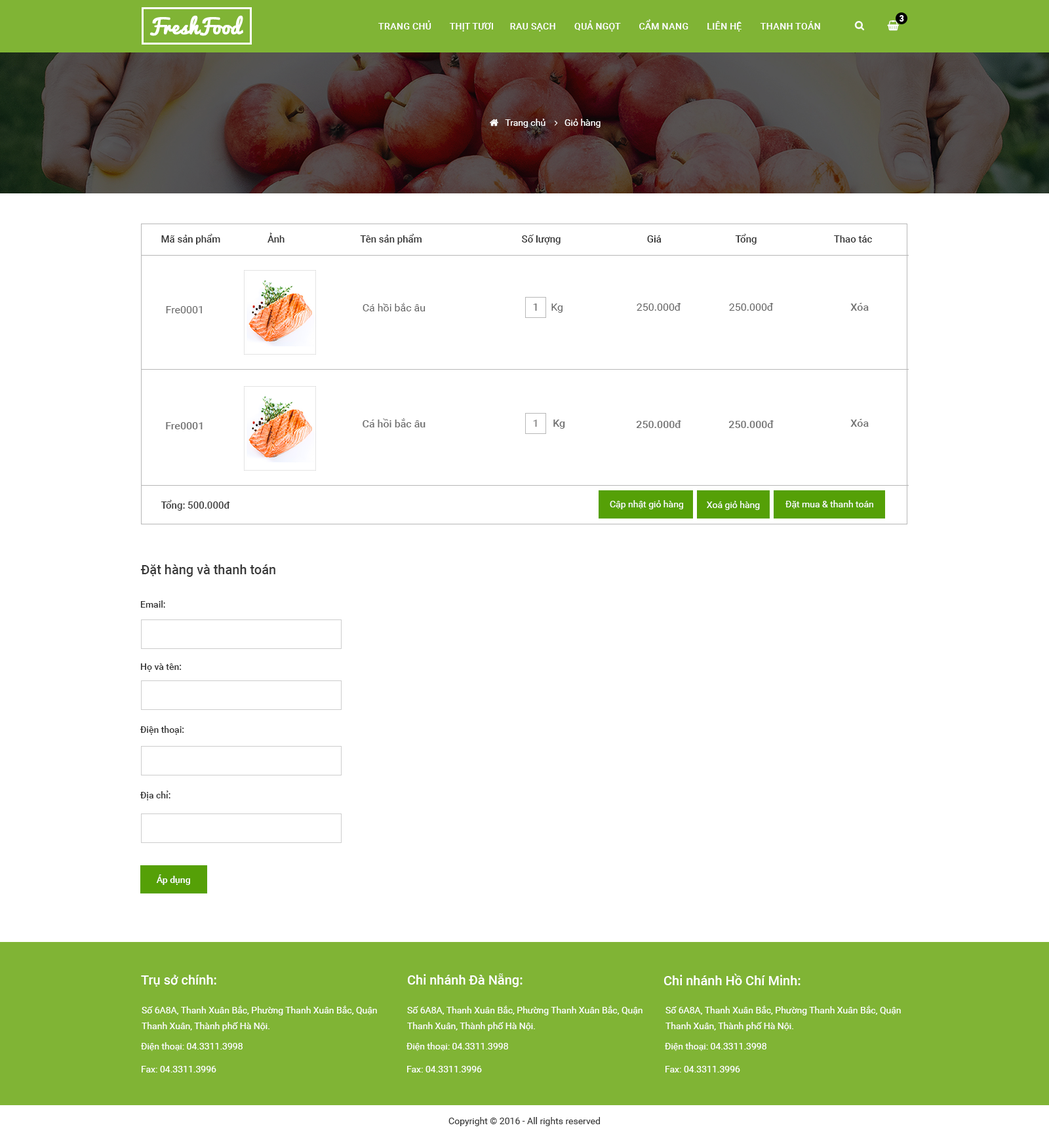
<style>
.page{position:relative;width:1049px;height:1136px;background:#ffffff}
.page>*{position:absolute;margin:0}
.t1{font:9.2px "RobotoCondensed-Bold";color:#ffffff}
.t2{font:9.2px "Roboto-Medium";color:#ffffff;text-transform:uppercase}
.t3{font:9.8px "Roboto-Medium";color:#333333}
.t4{font:10.5px "Roboto-Regular";color:#636363}
.t5{font:10.5px "Roboto-Medium";color:#727272}
.t6{font:10.5px "Roboto-Medium";color:#868585}
.t7{font:9.8px "Roboto-Medium";color:#3a3a3a}
.t8{font:9.2px "Roboto-Regular";color:#ffffff}
.t9{font:13.1px "Roboto-Medium";color:#3a3a3a}
.t10{font:9.2px "Roboto-Medium";color:#333333}
.t11{font:9.2px "Roboto-Medium";color:#ffffff}
.t12{font:13.1px "Roboto-Medium";color:#ffffff}
.t13{font:9.2px/15.7px "Roboto-Regular";color:#ffffff}
.t14{font:9.2px "Roboto-Regular";color:#333333}
</style>
<div class="page">
<p class="t1" style="left:900px;top:15px;width:4px;height:7px">3</p>
<p class="t2" style="left:378px;top:19px;width:442px;height:12px">Trang chủ        Thịt tươi       Rau sạch        Quả ngọt        Cẩm nang        Liên hệ   Thanh toán</p>
<p class="t3" style="left:161px;top:233px;width:711px;height:12px">Mã sản phẩm                Ảnh                          Tên sản phẩm                                    Số lượng                                    Giá                         Tổng                       Thao tác</p>
<p class="t4" style="left:363px;top:303px;width:63px;height:8px">Cá hồi bắc âu</p>
<p class="t4" style="left:533px;top:304px;width:4px;height:7px">1</p>
<p class="t4" style="left:552px;top:304px;width:11px;height:9px">Kg</p>
<p class="t4" style="left:637px;top:303px;width:44px;height:8px">250.000đ</p>
<p class="t4" style="left:729px;top:303px;width:45px;height:8px">250.000đ</p>
<p class="t5" style="left:851px;top:303px;width:18px;height:8px">Xóa</p>
<p class="t4" style="left:166px;top:306px;width:36px;height:7px">Fre0001</p>
<p class="t5" style="left:166px;top:422px;width:37px;height:8px">Fre0001</p>
<p class="t5" style="left:363px;top:418px;width:63px;height:10px">Cá hồi bắc âu</p>
<p class="t6" style="left:533px;top:420px;width:4px;height:7px">1</p>
<p class="t5" style="left:553px;top:420px;width:12px;height:9px">Kg</p>
<p class="t5" style="left:636px;top:420px;width:45px;height:8px">250.000đ</p>
<p class="t5" style="left:729px;top:420px;width:45px;height:8px">250.000đ</p>
<p class="t5" style="left:851px;top:419px;width:18px;height:8px">Xóa</p>
<p class="t7" style="left:161px;top:500px;width:69px;height:11px">Tổng: 500.000đ</p>
<p class="t8" style="left:610px;top:500px;width:73px;height:10px">Cập nhật giỏ hàng</p>
<p class="t8" style="left:707px;top:501px;width:53px;height:9px">Xoá giỏ hàng</p>
<p class="t8" style="left:786px;top:500px;width:87px;height:9px">Đặt mua &amp; thanh toán</p>
<p class="t9" style="left:140px;top:565px;width:135px;height:12px">Đặt hàng và thanh toán</p>
<p class="t10" style="left:140px;top:601px;width:25px;height:7px">Email:</p>
<p class="t10" style="left:140px;top:664px;width:42px;height:8px">Họ và tên:</p>
<p class="t10" style="left:140px;top:726px;width:44px;height:9px">Điện thoại:</p>
<p class="t10" style="left:140px;top:791px;width:31px;height:10px">Địa chỉ:</p>
<p class="t11" style="left:156px;top:875px;width:34px;height:10px">Áp dụng</p>
<p class="t12" style="left:141px;top:975px;width:75px;height:12px">Trụ sở chính:</p>
<p class="t12" style="left:408px;top:974px;width:115px;height:14px">Chi nhánh Đà Nẵng:</p>
<p class="t12" style="left:664px;top:974px;width:137px;height:12px">Chi nhánh Hồ Chí Minh:</p>
<p class="t13" style="left:142px;top:1006px;width:235px;height:26px">Số 6A8A, Thanh Xuân Bắc, Phường Thanh Xuân Bắc, Quận Thanh Xuân, Thành phố Hà Nội.</p>
<p class="t13" style="left:407px;top:1006px;width:236px;height:26px">Số 6A8A, Thanh Xuân Bắc, Phường Thanh Xuân Bắc, Quận Thanh Xuân, Thành phố Hà Nội.</p>
<p class="t13" style="left:666px;top:1006px;width:235px;height:26px">Số 6A8A, Thanh Xuân Bắc, Phường Thanh Xuân Bắc, Quận Thanh Xuân, Thành phố Hà Nội.</p>
<p class="t8" style="left:141px;top:1043px;width:102px;height:8px">Điện thoại: 04.3311.3998</p>
<p class="t8" style="left:407px;top:1043px;width:101px;height:8px">Điện thoại: 04.3311.3998</p>
<p class="t8" style="left:665px;top:1043px;width:102px;height:8px">Điện thoại: 04.3311.3998</p>
<p class="t8" style="left:142px;top:1066px;width:74px;height:7px">Fax: 04.3311.3996</p>
<p class="t8" style="left:407px;top:1066px;width:75px;height:7px">Fax: 04.3311.3996</p>
<p class="t8" style="left:666px;top:1066px;width:74px;height:7px">Fax: 04.3311.3996</p>
<p class="t14" style="left:449px;top:1117px;width:151px;height:10px">Copyright © 2016 - All rights reserved</p>
</div>
